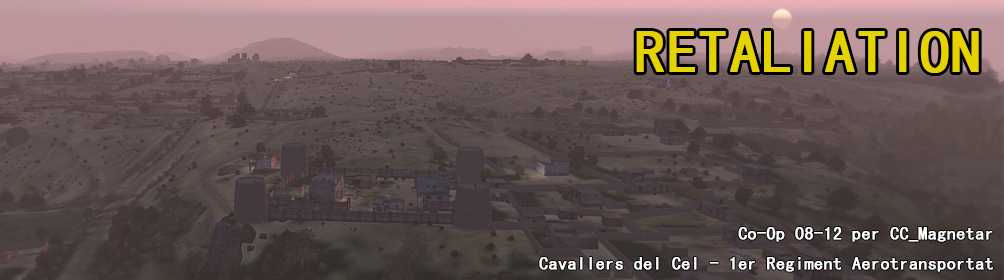
<style>
.page{position:relative;width:1004px;height:280px}
.page>*{position:absolute;margin:0}
.t1{font:60px "MS-Gothic";color:#e5d200;font-weight:bold}
.t2{font:18px/30px "MS-Gothic";color:#ffffff;font-weight:bold}
</style>
<div class="page">
<p class="t1" style="left:636px;top:31px;width:343px;height:42px">RETALIATION</p>
<p class="t2" style="left:539px;top:227px;width:454px;height:45px;text-align:right">Co-Op 08-12 per CC_Magnetar<br>Cavallers del Cel - 1er Regiment Aerotransportat</p>
</div>
